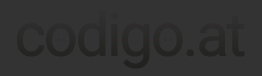
<style>
.page{position:relative;width:262px;height:76px;background:#333333}
.page>*{position:absolute;margin:0}
.t1{font:60px "Roboto-Regular";letter-spacing:-0.065em;color:#292928;font-weight:bold}
</style>
<div class="page">
<p class="t1" style="left:17px;top:10px;width:228px;height:59px">codigo.at</p>
</div>
